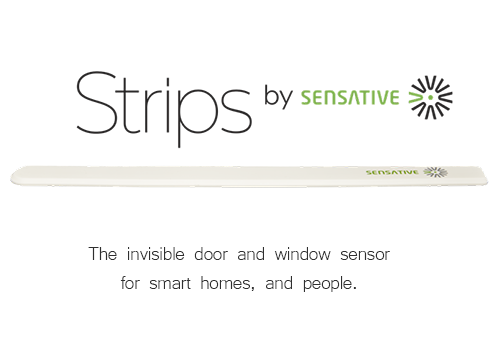
<style>
.page{position:relative;width:500px;height:350px;background:#ffffff}
.page>*{position:absolute;margin:0}
.t1{font:24px "Microsoft-Yi-Baiti";letter-spacing:-0.03em;color:#2f2f2f}
</style>
<div class="page">
<p class="t1" style="left:88px;top:247px;width:302px;height:45px;text-align:center">The invisible door and window sensor<br>for smart homes, and people.</p>
</div>
